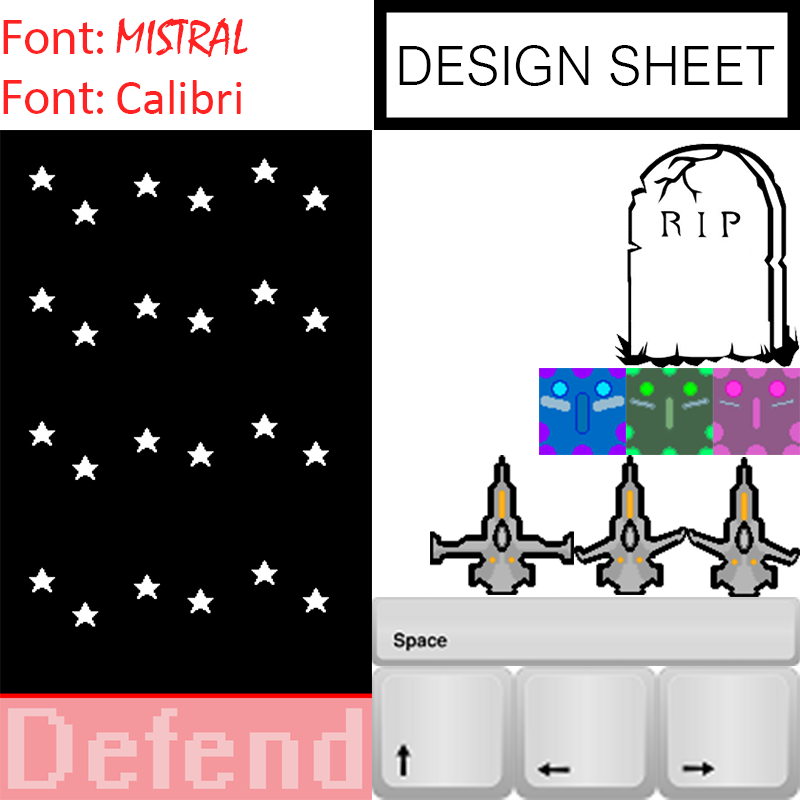
<style>
.page{position:relative;width:800px;height:800px;background:#ffffff}
.page>*{position:absolute;margin:0}
.t1{font:12px "Mistral";color:#ff2222}
.t2{font:12px "MyriadPro-Regular";color:#ff2222}
.t3{font:12px "Calibri";color:#ff2222}
.t4{font:13.3px "ArialNova-Light";color:#000000}
</style>
<div class="page">
<p class="t1" style="left:3px;top:18px;width:245px;height:96px"><span class="t2">Font: </span>MISTRAL<br><span class="t2">Font: </span><span class="t3">Calibri</span></p>
<p class="t4" style="left:399px;top:45px;width:376px;height:41px">DESIGN SHEET</p>
</div>
